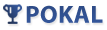
<style>
.page{position:relative;width:107px;height:30px;background:#ffffff}
.page>*{position:absolute;margin:0}
.t1{font:25px "MyriadPro-Bold";letter-spacing:0.011em;color:#335599}
</style>
<div class="page">
<p class="t1" style="left:26px;top:5px;width:77px;height:18px">POKAL</p>
</div>
